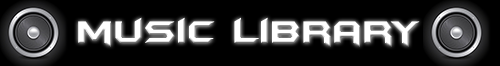
<style>
.page{position:relative;width:500px;height:66px;background:#000000}
.page>*{position:absolute;margin:0}
.t1{font:36px "BatmanForeverAlternate";color:#ffffff}
</style>
<div class="page">
<p class="t1" style="left:78px;top:17px;width:342px;height:30px">music library</p>
</div>
